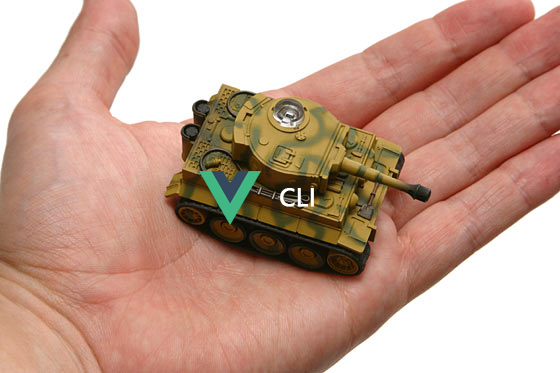
<style>
.page{position:relative;width:560px;height:373px;background:#ffffff}
.page>*{position:absolute;margin:0}
.t1{font:24px "MicrosoftYaHei";color:#ffffff;font-weight:bold}
</style>
<div class="page">
<p class="t1" style="left:280px;top:188px;width:34px;height:19px">CLI</p>
</div>
